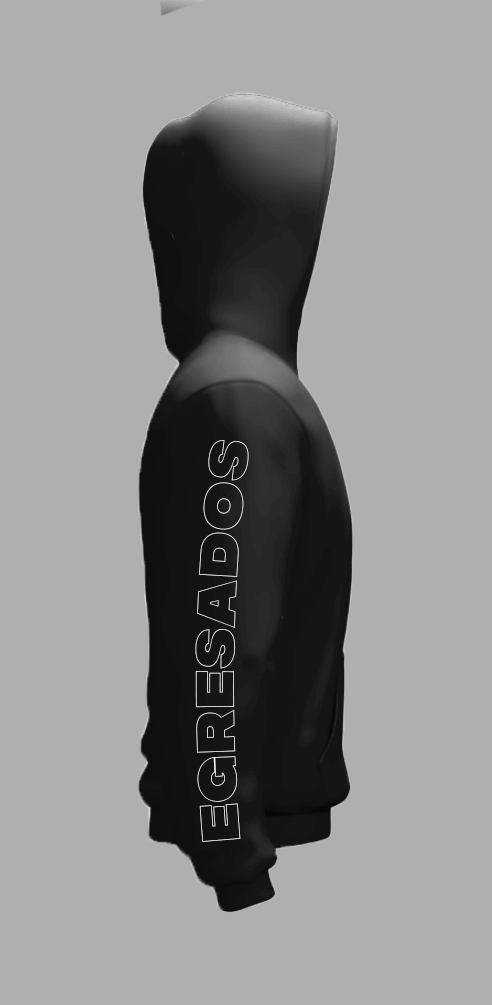
<style>
.page{position:relative;width:492px;height:1005px;background:#afafaf}
.page>*{position:absolute;margin:0}
.t1{font:53.9px "MADESoulmazeOutline";color:#ffffff}
</style>
<div class="page">
<p class="t1" style="left:195px;top:440px;width:54px;height:402px;rotate:-89deg">egresados</p>
</div>
